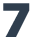
<style>
.page{position:relative;width:32px;height:40px;background:#ffffff}
.page>*{position:absolute;margin:0}
.t1{font:48px "SFProDisplay-Black";color:#2f3e4e}
</style>
<div class="page">
<p class="t1" style="left:3px;top:3px;width:27px;height:34px">7</p>
</div>
